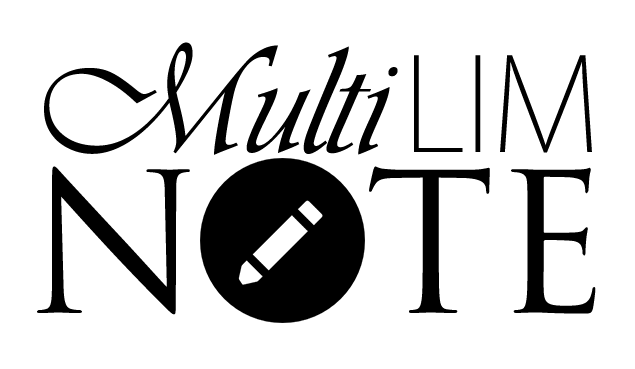
<style>
.page{position:relative;width:635px;height:369px;background:#ffffff}
.page>*{position:absolute;margin:0}
.t1{font:160px "Vivaldii";letter-spacing:-0.01em;color:#000000}
.t2{font:128px "KozGoPr6N-ExtraLight";letter-spacing:-0.01em;color:#000000}
.t3{font:189.9px "TrajanPro-Regular";letter-spacing:-0.01em;color:#000000}
</style>
<div class="page">
<p class="t1" style="left:44px;top:42px;width:354px;height:113px">Multi</p>
<p class="t2" style="left:414px;top:55px;width:178px;height:98px">LIM</p>
<p class="t3" style="left:37px;top:166px;width:559px;height:150px">NOTE</p>
</div>
